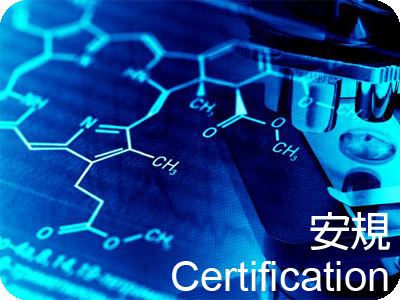
<style>
.page{position:relative;width:400px;height:300px}
.page>*{position:absolute;margin:0}
.t1{font:41.7px "AdobeFanHeitiStd-Bold";color:#ffffff}
.t2{font:41.7px "ArialMT";color:#ffffff}
</style>
<div class="page">
<p class="t1" style="left:310px;top:212px;width:80px;height:39px">安規</p>
<p class="t2" style="left:172px;top:261px;width:216px;height:30px">Certification</p>
</div>
